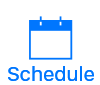
<style>
.page{position:relative;width:100px;height:85px;background:#ffffff}
.page>*{position:absolute;margin:0}
.t1{font:20px "SFUIText-RegularG1";color:#0076fe}
</style>
<div class="page">
<p class="t1" style="left:8px;top:66px;width:86px;height:15px">Schedule</p>
</div>
